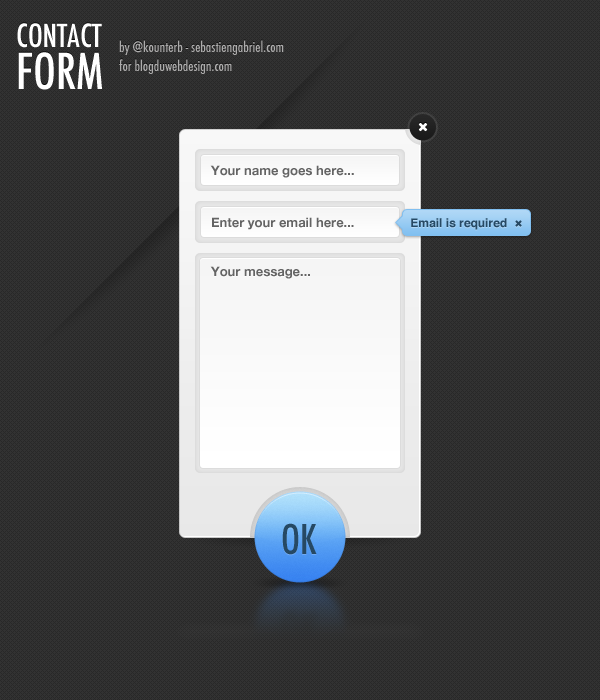
<style>
.page{position:relative;width:600px;height:700px;background:#323232}
.page>*{position:absolute;margin:0}
.t1{font:30.9px/42px "Futura-CondensedMedium";color:#ffffff}
.t2{font:47.9px/42px "Futura-CondensedMedium";color:#ffffff}
.t3{font:14px/19px "Futura-CondensedMedium";color:#adacac}
.t4{font:13px "HelveticaNeue-Bold";color:#646464}
.t5{font:12px "Helvetica-Bold";color:#264964}
.t6{font:39.7px "Futura-CondensedMedium";color:#264964}
</style>
<div class="page">
<p class="t1" style="left:17px;top:23px;width:85px;height:67px">CONTACT <br><span class="t2">FORM</span></p>
<p class="t3" style="left:119px;top:40px;width:165px;height:34px">by @kounterb - sebastiengabriel.com<br>for blogduwebdesign.com</p>
<p class="t4" style="left:210px;top:165px;width:144px;height:13px">Your name goes here...</p>
<p class="t4" style="left:212px;top:217px;width:142px;height:13px">Enter your email here...</p>
<p class="t5" style="left:411px;top:218px;width:96px;height:12px">Email is required</p>
<p class="t4" style="left:210px;top:266px;width:100px;height:13px">Your message...</p>
<p class="t6" style="left:282px;top:523px;width:35px;height:32px">OK</p>
</div>
